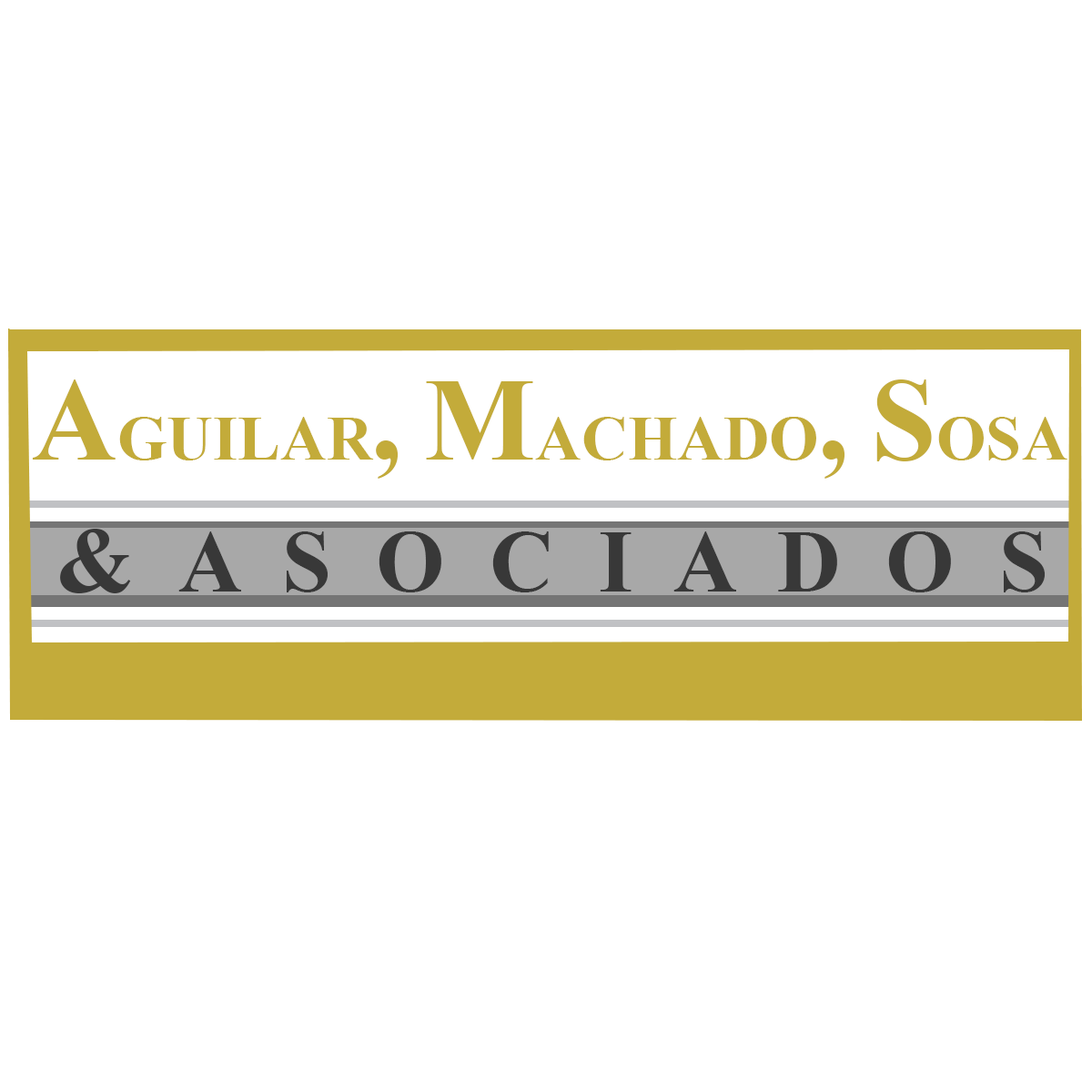
<style>
.page{position:relative;width:1092px;height:1092px;background:#ffffff}
.page>*{position:absolute;margin:0}
.t1{font:63.2px "TimesNewRomanPS-BoldMT";letter-spacing:0.005em;color:#c3ab3a}
.t2{font:117px "TimesNewRomanPS-BoldMT";letter-spacing:0.005em;color:#c3ab3a}
.t3{font:93.5px "TimesNewRomanPS-BoldMT";letter-spacing:0.005em;color:#383838}
.t4{font:88px "TimesNewRomanPS-BoldMT";letter-spacing:0.005em;color:#383838}
</style>
<div class="page">
<p class="t1" style="left:32px;top:379px;width:1035px;height:100px"><span class="t2">A</span>GUILAR<span class="t2">, M</span>ACHADO<span class="t2">, S</span>OSA</p>
<p class="t3" style="left:60px;top:529px;width:71px;height:64px">&amp;</p>
<p class="t4" style="left:178px;top:531px;width:867px;height:61px">A  S  O  C  I  A  D  O  S</p>
</div>
